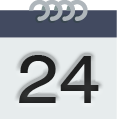
<style>
.page{position:relative;width:117px;height:119px;background:#e7eced}
.page>*{position:absolute;margin:0}
.t1{font:69.7px "Swiss721BT-Roman";color:#222323;scale:1.09 1}
</style>
<div class="page">
<p class="t1" style="left:19px;top:55px;width:80px;height:48px">24</p>
</div>
